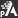
<style>
.page{position:relative;width:18px;height:18px;background:#333333}
.page>*{position:absolute;margin:0}
.t1{font:8px "ComicSansMS-Bold";color:#ffffff;text-transform:uppercase}
</style>
<div class="page">
<p class="t1" style="left:0px;top:11px;width:5px;height:6px">p</p>
</div>
